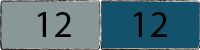
<style>
.page{position:relative;width:200px;height:50px;background:#14526b}
.page>*{position:absolute;margin:0}
.t1{font:37.5px "MyriadHebrew-Regular";color:#000000}
</style>
<div class="page">
<p class="t1" style="left:37px;top:12px;width:34px;height:25px">12</p>
<p class="t1" style="left:133px;top:12px;width:34px;height:25px">12</p>
</div>
